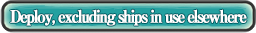
<style>
.page{position:relative;width:256px;height:33px}
.page>*{position:absolute;margin:0}
.t1{font:17px "RyuminPro-ExBold";letter-spacing:-0.12em;color:#ffffff;font-weight:bold;scale:0.9 1}
</style>
<div class="page">
<p class="t1" style="left:10px;top:9px;width:237px;height:17px">Deploy, excluding ships in use elsewhere</p>
</div>
